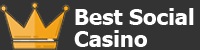
<style>
.page{position:relative;width:200px;height:50px;background:#333333}
.page>*{position:absolute;margin:0}
.t1{font:22px/22px "Tahoma-Bold";color:#ffffff}
</style>
<div class="page">
<p class="t1" style="left:74px;top:8px;width:120px;height:39px">Best Social <br>Casino</p>
</div>
